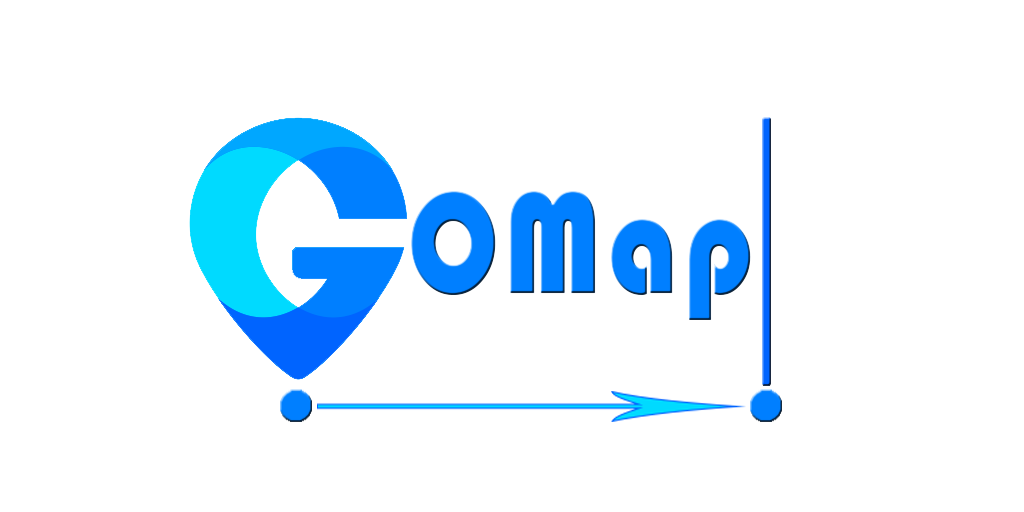
<style>
.page{position:relative;width:1024px;height:512px;background:#ffffff}
.page>*{position:absolute;margin:0}
.t1{font:150px "Bauhaus93";letter-spacing:0.05em;color:#007fff;scale:0.8 1}
</style>
<div class="page">
<p class="t1" style="left:411px;top:191px;width:340px;height:129px">OMap</p>
</div>
